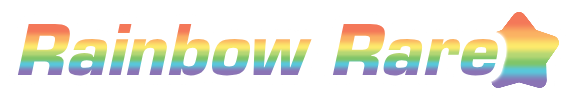
<style>
.page{position:relative;width:575px;height:100px;background:#ffffff}
.page>*{position:absolute;margin:0}
.t1{font:68px "Eurostile-BoldOblique"}
</style>
<div class="page">
<p class="t1" style="left:17px;top:23px;width:481px;height:53px">Rainbow Rare</p>
</div>
